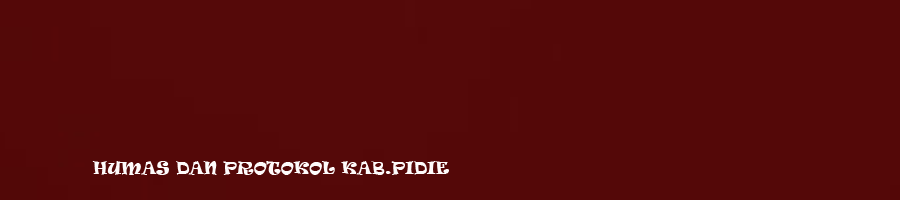
<style>
.page{position:relative;width:900px;height:200px;background:#540808}
.page>*{position:absolute;margin:0}
.t1{font:16px "Ravie";color:#fefbfb}
</style>
<div class="page">
<p class="t1" style="left:92px;top:161px;width:357px;height:14px">HUMAS DAN PROTOKOL KAB.PIDIE</p>
</div>
